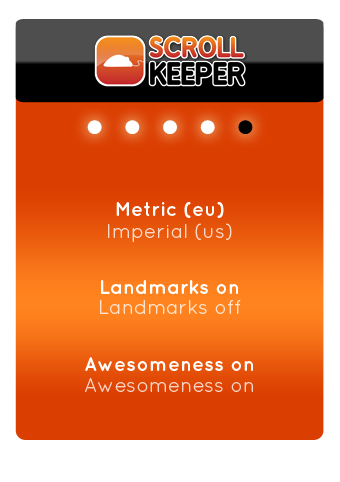
<style>
.page{position:relative;width:340px;height:482px;background:#ffffff}
.page>*{position:absolute;margin:0}
.t1{font:20px "QuicksandBold-Regular";color:#ffffff}
.t2{font:20px "QuicksandBook-Regular";color:#fad8c7}
.t3{font:20px "QuicksandBook-Regular";color:#ffe2cb}
.t4{font:20px "QuicksandBook-Regular";color:#f7d4c5}
</style>
<div class="page">
<p class="t1" style="left:116px;top:202px;width:108px;height:16px">Metric (eu)</p>
<p class="t2" style="left:108px;top:223px;width:124px;height:19px">Imperial (us)</p>
<p class="t1" style="left:101px;top:280px;width:137px;height:14px">Landmarks on</p>
<p class="t3" style="left:100px;top:300px;width:141px;height:14px">Landmarks off</p>
<p class="t1" style="left:85px;top:357px;width:168px;height:14px">Awesomeness on</p>
<p class="t4" style="left:85px;top:378px;width:168px;height:14px">Awesomeness on</p>
</div>
